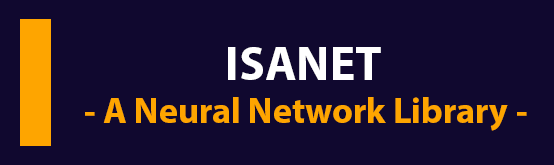
<style>
.page{position:relative;width:554px;height:165px;background:#10082f}
.page>*{position:absolute;margin:0}
.t1{font:48px "MyriadPro-Bold";color:#ffffff}
.t2{font:36px "MyriadPro-Bold";color:#fea500}
</style>
<div class="page">
<p class="t1" style="left:228px;top:47px;width:153px;height:33px">ISANET</p>
<p class="t2" style="left:85px;top:97px;width:442px;height:34px">- A Neural Network Library -</p>
</div>
